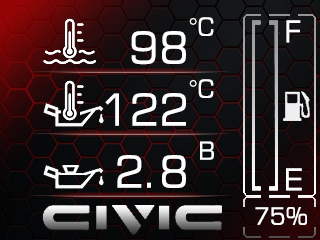
<style>
.page{position:relative;width:320px;height:240px}
.page>*{position:absolute;margin:0}
.t1{font:25px "Square721BT-Roman";color:#ffffff}
.t2{font:30px "Square721BT-Roman";color:#ffffff}
.t3{font:44px "Square721BT-Roman";color:#ffffff}
.t4{font:24px "Square721BT-Roman";color:#ffffff}
</style>
<div class="page">
<p class="t1" style="left:189px;top:17px;width:25px;height:19px">°C</p>
<p class="t2" style="left:286px;top:20px;width:15px;height:23px">F</p>
<p class="t3" style="left:131px;top:31px;width:55px;height:34px">98</p>
<p class="t1" style="left:189px;top:79px;width:25px;height:19px">°C</p>
<p class="t3" style="left:105px;top:93px;width:81px;height:33px">122</p>
<p class="t1" style="left:200px;top:141px;width:14px;height:19px">B</p>
<p class="t3" style="left:117px;top:155px;width:69px;height:33px">2.8</p>
<p class="t2" style="left:286px;top:168px;width:16px;height:23px">E</p>
<p class="t4" style="left:255px;top:207px;width:52px;height:18px">75%</p>
</div>
